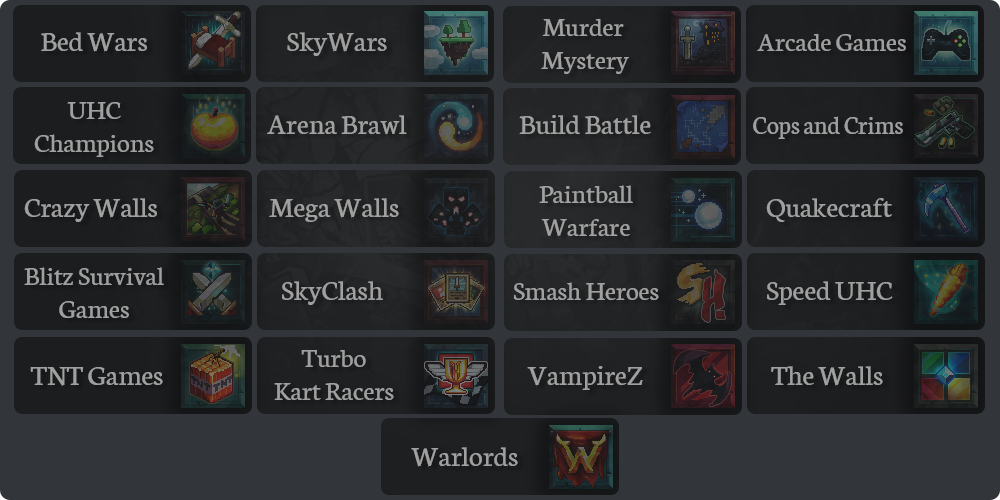
<style>
.page{position:relative;width:1000px;height:500px;background:#32363b}
.page>*{position:absolute;margin:0}
.t1{font:28px "Neuton-Regular";color:#a0a0a0}
.t2{font:30px "Neuton-Regular";color:#9fa0a0}
.t3{font:30px "Neuton-Regular";color:#a0a0a0}
.t4{font:28px "Neuton-Regular";color:#9fa0a0}
.t5{font:30px "Neuton-Regular";color:#a0a1a1}
.t6{font:30px "Neuton-Regular";color:#a0a0a1}
.t7{font:26px "Neuton-Regular";color:#a0a0a0}
.t8{font:28px "Neuton-Regular";color:#a1a1a1}
.t9{font:30px "Neuton-Regular";color:#a1a1a1}
.t10{font:28px "Neuton-Regular";color:#a0a0a1}
</style>
<div class="page">
<p class="t1" style="left:541px;top:18px;width:88px;height:56px;text-align:center">Murder <br>Mystery</p>
<p class="t2" style="left:41px;top:32px;width:106px;height:20px">Bed Wars</p>
<p class="t3" style="left:287px;top:32px;width:100px;height:24px">SkyWars</p>
<p class="t1" style="left:757px;top:33px;width:149px;height:18px">Arcade Games</p>
<p class="t4" style="left:34px;top:102px;width:120px;height:55px;text-align:center">UHC<br>Champions</p>
<p class="t5" style="left:267px;top:115px;width:140px;height:19px">Arena Brawl</p>
<p class="t6" style="left:519px;top:115px;width:132px;height:19px">Build Battle</p>
<p class="t7" style="left:753px;top:116px;width:150px;height:23px">Cops and Crims</p>
<p class="t8" style="left:539px;top:185px;width:94px;height:51px;text-align:center">Paintball<br>Warfare</p>
<p class="t2" style="left:24px;top:198px;width:133px;height:24px">Crazy Walls</p>
<p class="t9" style="left:269px;top:198px;width:130px;height:24px">Mega Walls</p>
<p class="t3" style="left:766px;top:198px;width:126px;height:24px">Quakecraft</p>
<p class="t4" style="left:24px;top:267px;width:140px;height:51px;text-align:center">Blitz Survival<br>Games</p>
<p class="t3" style="left:282px;top:281px;width:101px;height:24px">SkyClash</p>
<p class="t3" style="left:767px;top:281px;width:126px;height:24px">Speed UHC</p>
<p class="t10" style="left:513px;top:282px;width:146px;height:18px">Smash Heroes</p>
<p class="t1" style="left:274px;top:350px;width:120px;height:50px;text-align:center">Turbo<br>Kart Racers</p>
<p class="t3" style="left:527px;top:366px;width:116px;height:24px">VampireZ</p>
<p class="t3" style="left:771px;top:366px;width:112px;height:20px">The Walls</p>
<p class="t2" style="left:30px;top:367px;width:133px;height:19px">TNT Games</p>
<p class="t3" style="left:411px;top:447px;width:107px;height:20px">Warlords</p>
</div>
